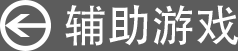
<style>
.page{position:relative;width:238px;height:51px;background:#5c5c5c}
.page>*{position:absolute;margin:0}
.t1{font:44.2px "AdobeHeitiStd-Regular";color:#ffffff}
</style>
<div class="page">
<p class="t1" style="left:65px;top:4px;width:174px;height:42px">辅助游戏</p>
</div>
